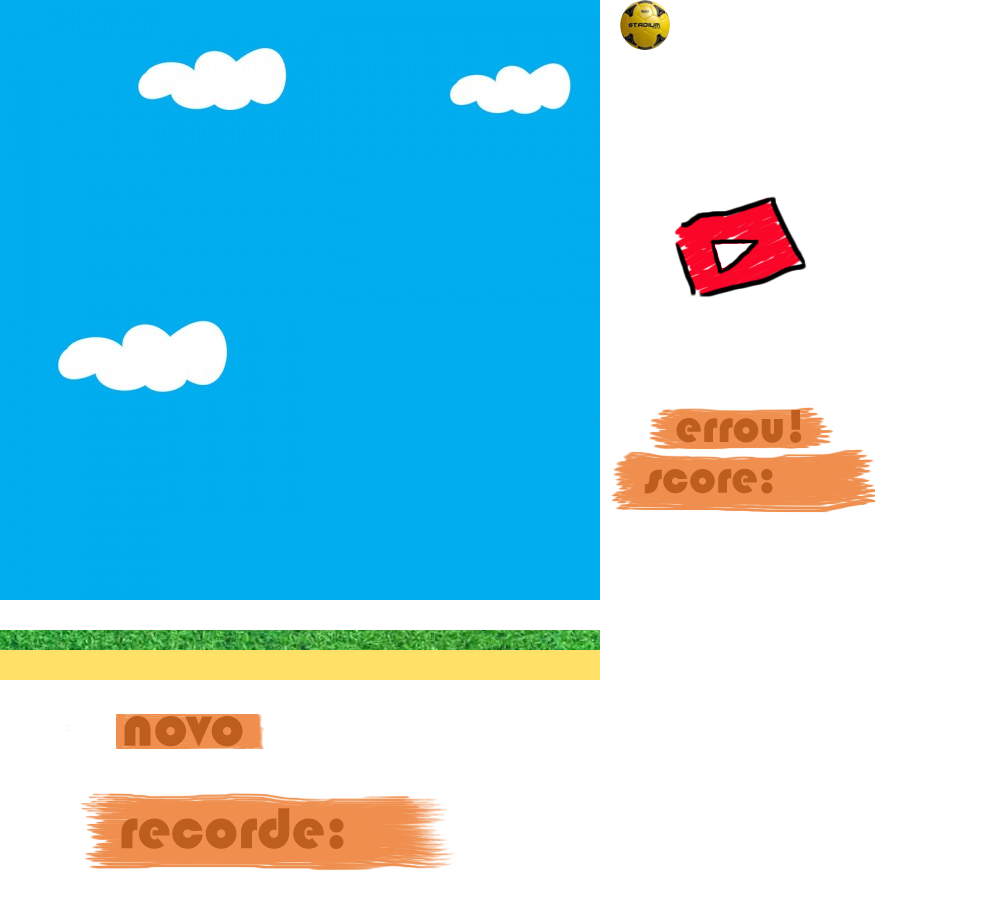
<style>
.page{position:relative;width:1002px;height:905px;background:#ffffff}
.page>*{position:absolute;margin:0}
.t1{font:48px "Bauhaus93";color:#bd5e1f}
.t2{font:60px "Bauhaus93";color:#bd5e1f}
</style>
<div class="page">
<p class="t1" style="left:676px;top:410px;width:126px;height:33px">!errou</p>
<p class="t1" style="left:644px;top:468px;width:129px;height:26px">:score</p>
<p class="t2" style="left:124px;top:716px;width:119px;height:31px">novo</p>
<p class="t2" style="left:121px;top:808px;width:223px;height:41px">:recorde</p>
</div>
